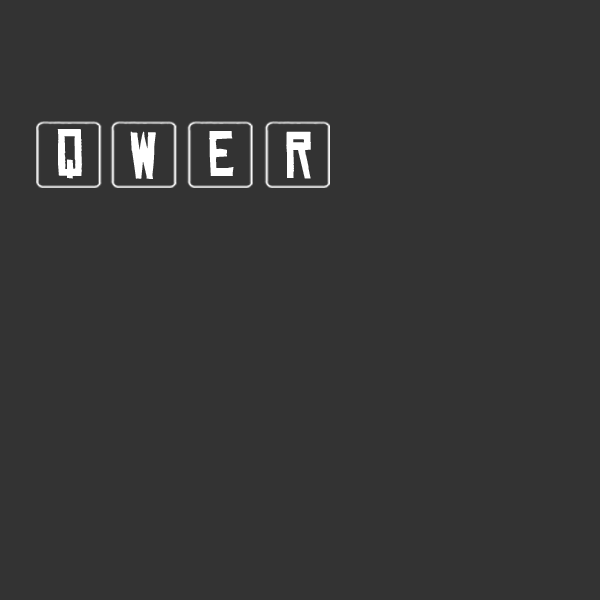
<style>
.page{position:relative;width:600px;height:600px;background:#333333}
.page>*{position:absolute;margin:0}
.t1{font:63.1px "ChineseRocksRg-Regular";letter-spacing:0.017em;color:#ffffff}
</style>
<div class="page">
<p class="t1" style="left:57px;top:129px;width:26px;height:50px">q</p>
<p class="t1" style="left:130px;top:131px;width:26px;height:48px">w</p>
<p class="t1" style="left:209px;top:131px;width:25px;height:45px">e</p>
<p class="t1" style="left:286px;top:131px;width:25px;height:48px">r</p>
</div>
